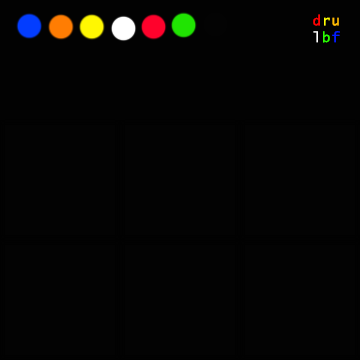
<style>
.page{position:relative;width:360px;height:360px;background:#030303}
.page>*{position:absolute;margin:0}
.t1{font:14px "LucidaConsole";letter-spacing:0.075em;color:#ff0202}
.t2{font:14px "LucidaConsole";letter-spacing:0.075em;color:#ffff02}
.t3{font:14px "LucidaConsole";letter-spacing:0.075em;color:#ffbc03}
.t4{font:14px "LucidaConsole";letter-spacing:0.075em;color:#ffffff}
.t5{font:14px "LucidaConsole";letter-spacing:0.075em;color:#2cff02}
.t6{font:14px "LucidaConsole";letter-spacing:0.075em;color:#031cff}
</style>
<div class="page">
<p class="t1" style="left:313px;top:14px;width:27px;height:29px">d<span class="t2">r</span><span class="t3">u<br></span><span class="t4">l</span><span class="t5">b</span><span class="t6">f</span></p>
</div>
